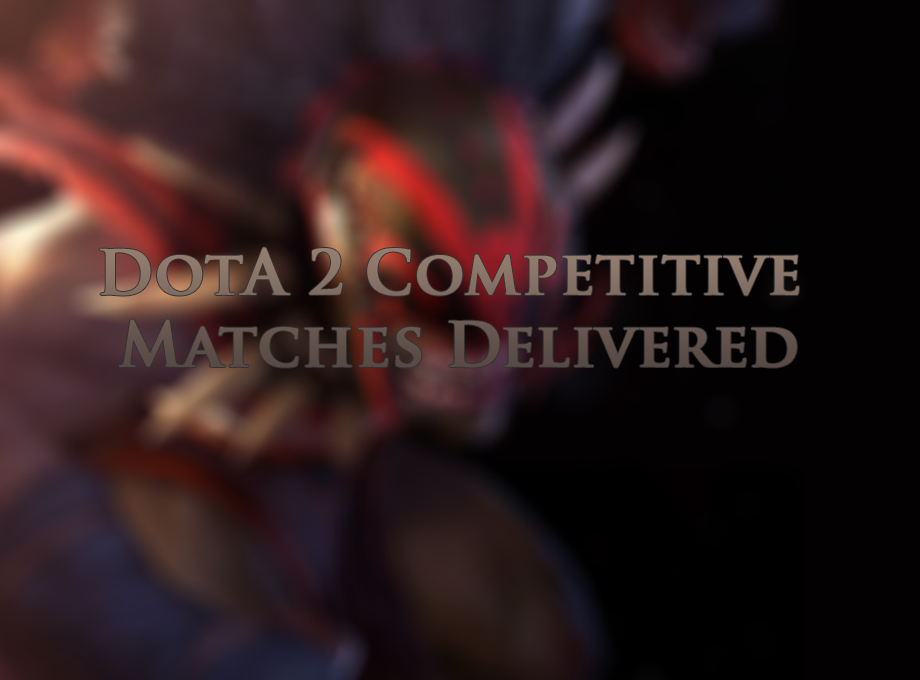
<style>
.page{position:relative;width:920px;height:680px}
.page>*{position:absolute;margin:0}
.t1{font:60px "TrajanPro-Bold";font-weight:bold}
</style>
<div class="page">
<p class="t1" style="left:99px;top:247px;width:700px;height:121px;text-align:center">DotA 2 Competitive <br>Matches Delivered</p>
</div>
